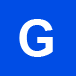
<style>
.page{position:relative;width:76px;height:76px;background:#004de5}
.page>*{position:absolute;margin:0}
.t1{font:50px "Arial-BoldMT";color:#ffffff}
</style>
<div class="page">
<p class="t1" style="left:19px;top:19px;width:34px;height:38px">G</p>
</div>
